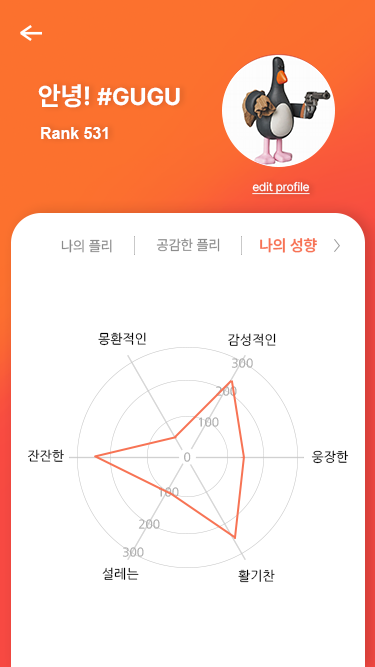
<style>
.page{position:relative;width:375px;height:667px;background:#ffffff}
.page>*{position:absolute;margin:0}
.t1{font:24px "PretendardVariable-Bold";color:#ffffff}
.t2{font:26px "PretendardVariable-Bold";color:#ffffff}
.t3{font:16px "Arial-BoldMT";color:#ffffff}
.t4{font:12px "PretendardVariable-Regular";color:#ffffff;text-decoration:underline}
.t5{font:14.4px "PretendardVariable-Regular";color:#8c8c8c}
.t6{font:16px "PretendardVariable-SemiBold";color:#f77354}
.t7{font:13.1px "NanumGothic";color:#010101}
.t8{font:13.1px "NanumGothic";color:#000000}
.t9{font:12px "NanumGothic";color:#ababab}
</style>
<div class="page">
<p class="t1" style="left:38px;top:84px;width:142px;height:24px"><span class="t2">안녕! </span>#GUGU</p>
<p class="t3" style="left:41px;top:127px;width:67px;height:12px">Rank 531</p>
<p class="t4" style="left:252px;top:181px;width:58px;height:14px">edit profile</p>
<p class="t5" style="left:61px;top:239px;width:51px;height:14px">나의 플리</p>
<p class="t5" style="left:156px;top:238px;width:64px;height:14px">공감한 플리</p>
<p class="t6" style="left:260px;top:238px;width:57px;height:15px">나의 성향</p>
<p class="t7" style="left:98px;top:332px;width:48px;height:14px">몽환적인</p>
<p class="t8" style="left:228px;top:333px;width:48px;height:13px">감성적인</p>
<p class="t9" style="left:231px;top:358px;width:22px;height:10px">300</p>
<p class="t9" style="left:215px;top:386px;width:22px;height:10px">200</p>
<p class="t9" style="left:199px;top:417px;width:20px;height:10px">100</p>
<p class="t8" style="left:28px;top:449px;width:36px;height:13px">잔잔한</p>
<p class="t9" style="left:184px;top:452px;width:7px;height:10px">0</p>
<p class="t8" style="left:311px;top:450px;width:38px;height:14px">웅장한</p>
<p class="t9" style="left:159px;top:487px;width:20px;height:10px">100</p>
<p class="t9" style="left:138px;top:519px;width:22px;height:10px">200</p>
<p class="t9" style="left:122px;top:547px;width:22px;height:10px">300</p>
<p class="t8" style="left:102px;top:567px;width:37px;height:13px">설레는</p>
<p class="t8" style="left:238px;top:569px;width:37px;height:14px">활기찬</p>
</div>
